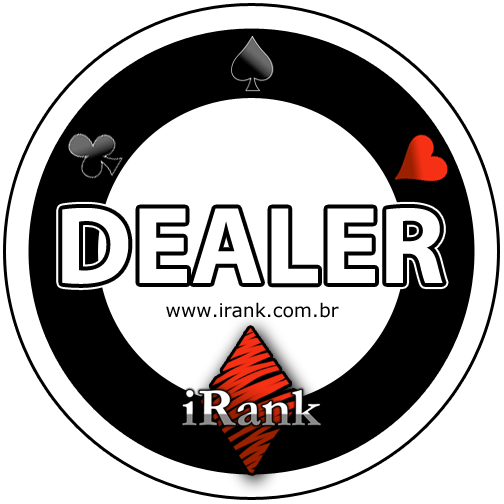
<style>
.page{position:relative;width:504px;height:504px;background:#ffffff}
.page>*{position:absolute;margin:0}
.t1{font:110.5px "MyriadPro-Bold";color:#ffffff}
.t2{font:18.8px "Verdana";color:#000000}
</style>
<div class="page">
<p class="t1" style="left:62px;top:208px;width:381px;height:76px">DEALER</p>
<p class="t2" style="left:166px;top:302px;width:173px;height:16px">www.irank.com.br</p>
</div>
